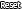
<style>
.page{position:relative;width:22px;height:9px;background:#ffffff}
.page>*{position:absolute;margin:0}
.t1{font:8px "KohinoorBangla-Regular";color:#ffffff}
</style>
<div class="page">
<p class="t1" style="left:1px;top:1px;width:20px;height:7px">Reset</p>
</div>
